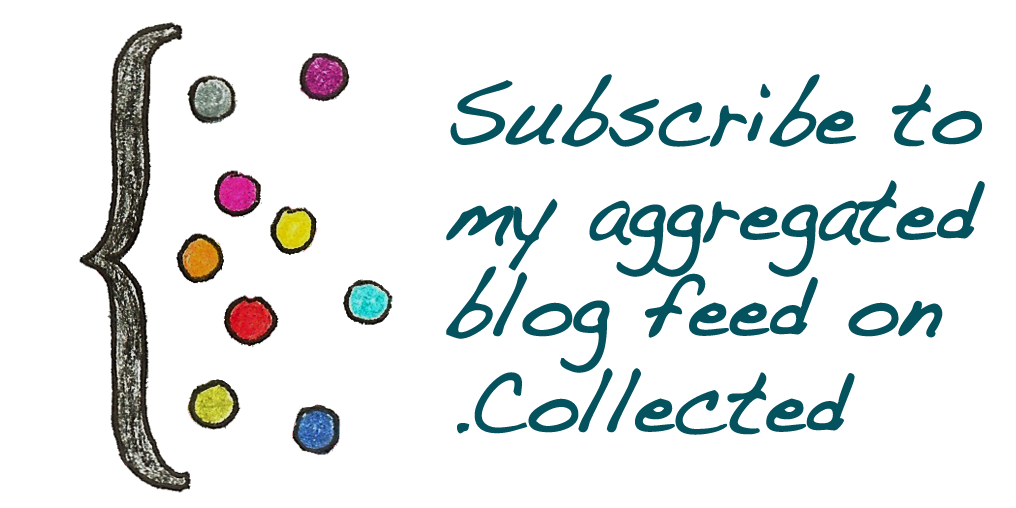
<style>
.page{position:relative;width:1016px;height:508px;background:#ffffff}
.page>*{position:absolute;margin:0}
.t1{font:88px "Handwriting-Dakota";letter-spacing:-0.01em;color:#04525e;font-weight:bold;scale:0.91 1}
</style>
<div class="page">
<p class="t1" style="left:446px;top:74px;width:539px;height:361px">Subscribe to <br>my aggregated<br>blog feed on <br>.Collected</p>
</div>
